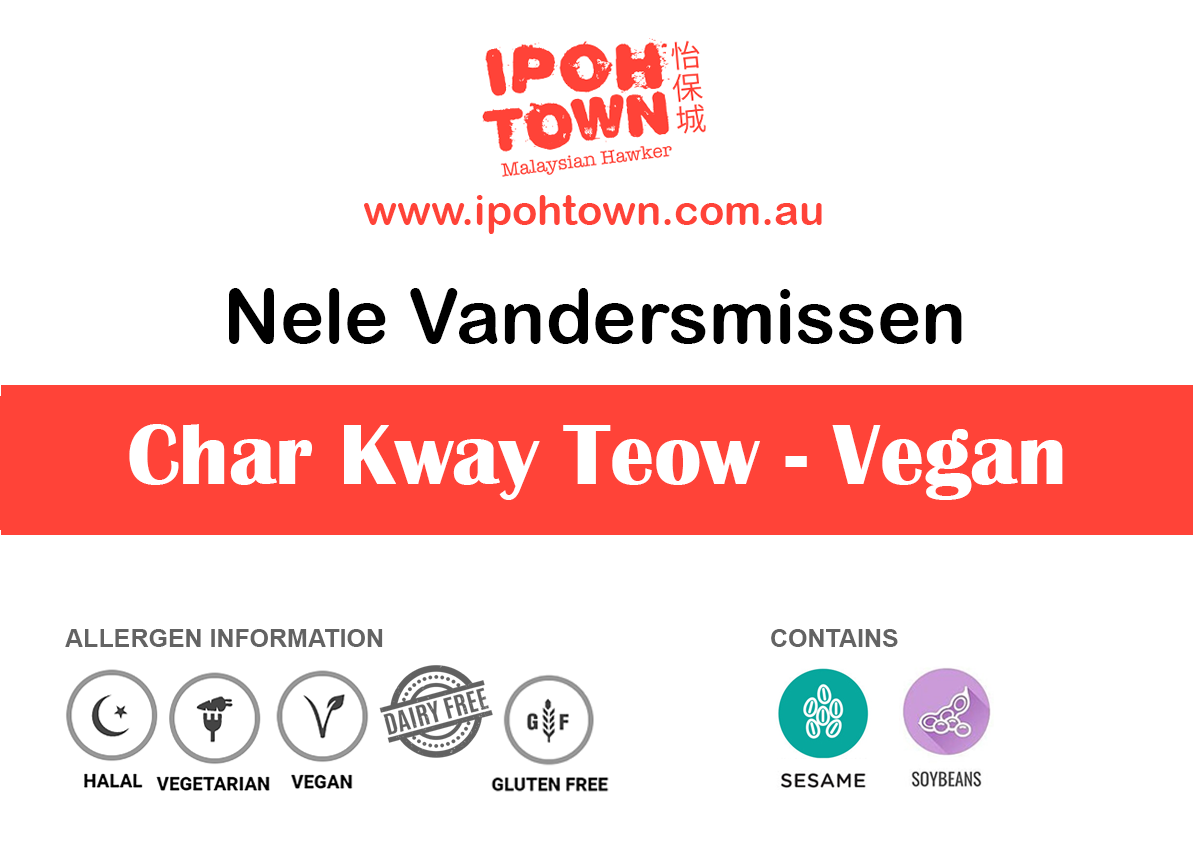
<style>
.page{position:relative;width:1193px;height:850px;background:#ffffff}
.page>*{position:absolute;margin:0}
.t1{font:41.7px "ArialRoundedMTBold";color:#ff4338}
.t2{font:75px "ArialRoundedMTBold";color:#000000}
.t3{font:87.5px "BritannicBold";color:#ffffff}
.t4{font:25px "Arial-BoldMT";color:#636363}
</style>
<div class="page">
<p class="t1" style="left:364px;top:195px;width:458px;height:39px">www.ipohtown.com.au</p>
<p class="t2" style="left:229px;top:288px;width:733px;height:56px">Nele Vandersmissen</p>
<p class="t3" style="left:129px;top:424px;width:934px;height:76px">Char Kway Teow - Vegan</p>
<p class="t4" style="left:65px;top:629px;width:318px;height:18px">ALLERGEN INFORMATION</p>
<p class="t4" style="left:771px;top:629px;width:127px;height:18px">CONTAINS</p>
</div>
